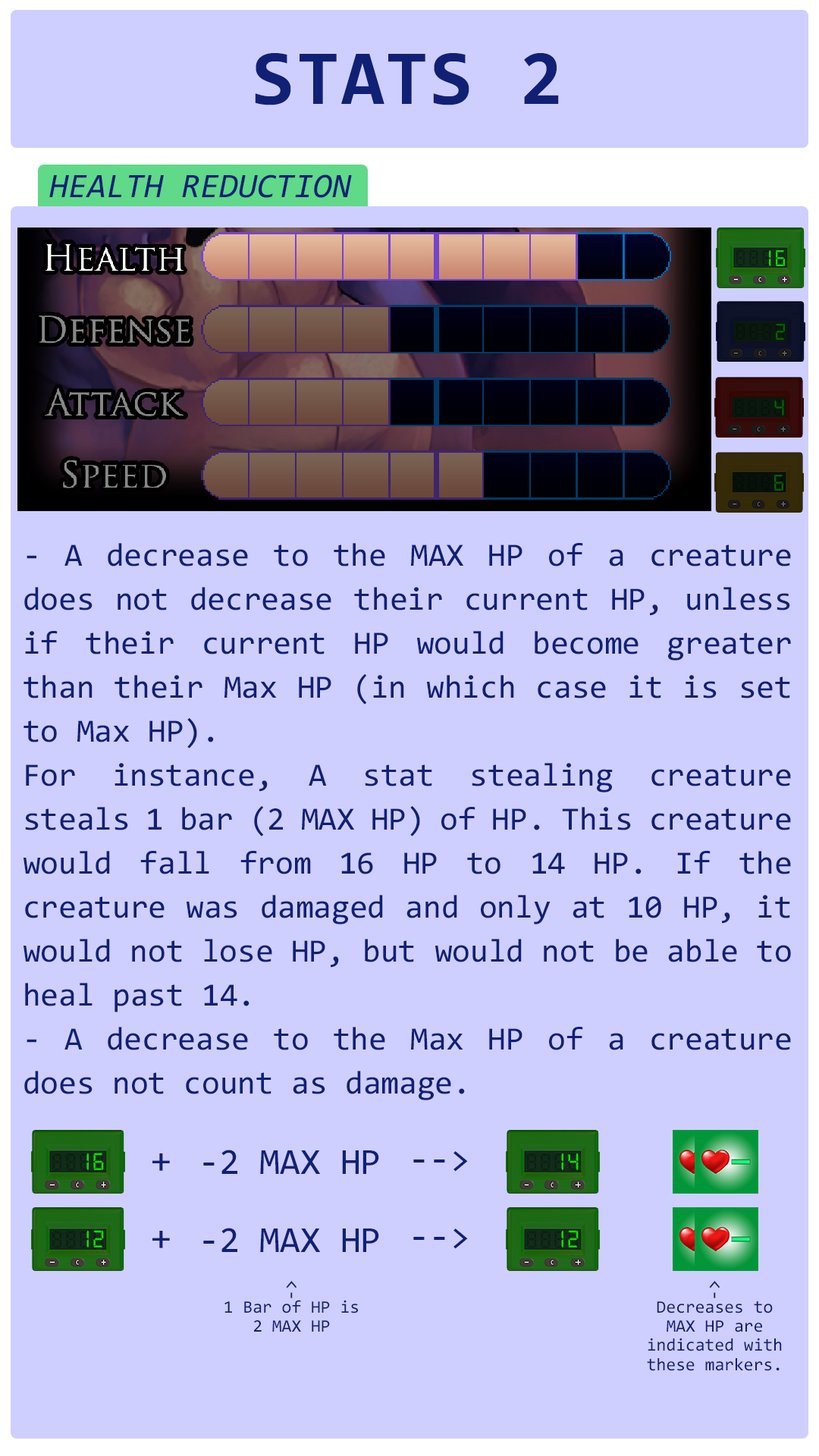
<style>
.page{position:relative;width:819px;height:1456px;background:#cfcfff}
.page>*{position:absolute;margin:0}
.t1{font:78.3px "Consolas-Bold";letter-spacing:0.02em;color:#102175}
.t2{font:34.3px "Consolas-Italic";color:#102175}
.t3{font:24.4px "Digital-7";letter-spacing:0.12em;color:#12dc01}
.t4{font:24.4px "Digital-7";letter-spacing:0.12em;color:#086100}
.t5{font:32.6px/44px "Consolas";color:#102175}
.t6{font:25.7px "Digital-7";letter-spacing:0.12em;color:#12dc01}
.t7{font:36.7px "Consolas";color:#102175}
.t8{font:19.1px "Consolas";color:#102175}
.t9{font:17.7px/19.2px "Consolas";color:#102175}
</style>
<div class="page">
<p class="t1" style="left:255px;top:53px;width:304px;height:52px">STATS 2</p>
<p class="t2" style="left:49px;top:174px;width:303px;height:24px">HEALTH REDUCTION</p>
<p class="t3" style="left:769px;top:250px;width:16px;height:16px">16</p>
<p class="t4" style="left:776px;top:324px;width:9px;height:16px">2</p>
<p class="t4" style="left:774px;top:400px;width:10px;height:16px">4</p>
<p class="t4" style="left:774px;top:475px;width:9px;height:16px">6</p>
<p class="t5" style="left:24px;top:543px;width:767px;height:557px;text-align:justify">- A decrease to the MAX HP of a creature does not decrease their current HP, unless if their current HP would become greater than their Max HP (in which case it is set to Max HP).<br>For instance, A stat stealing creature steals 1 bar (2 MAX HP) of HP. This creature would fall from 16 HP to 14 HP. If the creature was damaged and only at 10 HP, it would not lose HP, but would not be able to heal past 14.<br>- A decrease to the Max HP of a creature does not count as damage.</p>
<p class="t6" style="left:86px;top:1153px;width:18px;height:17px">16</p>
<p class="t7" style="left:152px;top:1153px;width:18px;height:18px">+</p>
<p class="t7" style="left:203px;top:1150px;width:176px;height:24px">-2 MAX HP</p>
<p class="t7" style="left:413px;top:1151px;width:55px;height:21px">--&gt;</p>
<p class="t6" style="left:561px;top:1153px;width:18px;height:17px">14</p>
<p class="t7" style="left:203px;top:1228px;width:176px;height:24px">-2 MAX HP</p>
<p class="t7" style="left:413px;top:1228px;width:55px;height:21px">--&gt;</p>
<p class="t6" style="left:86px;top:1230px;width:18px;height:17px">12</p>
<p class="t7" style="left:152px;top:1231px;width:18px;height:17px">+</p>
<p class="t6" style="left:561px;top:1230px;width:18px;height:17px">12</p>
<p class="t8" style="left:286px;top:1281px;width:11px;height:17px;rotate:-90deg">-&gt;</p>
<p class="t8" style="left:709px;top:1281px;width:11px;height:17px;rotate:-90deg">-&gt;</p>
<p class="t9" style="left:224px;top:1300px;width:134px;height:32px;text-align:center">1 Bar of HP is 2 MAX HP</p>
<p class="t9" style="left:647px;top:1301px;width:135px;height:70px;text-align:center">Decreases to MAX HP are indicated with these markers.</p>
</div>
